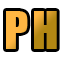
<style>
.page{position:relative;width:62px;height:62px;background:#ffffff}
.page>*{position:absolute;margin:0}
.t1{font:48px "Impact";letter-spacing:0.08em}
</style>
<div class="page">
<p class="t1" style="left:6px;top:11px;width:51px;height:38px">PH</p>
</div>
